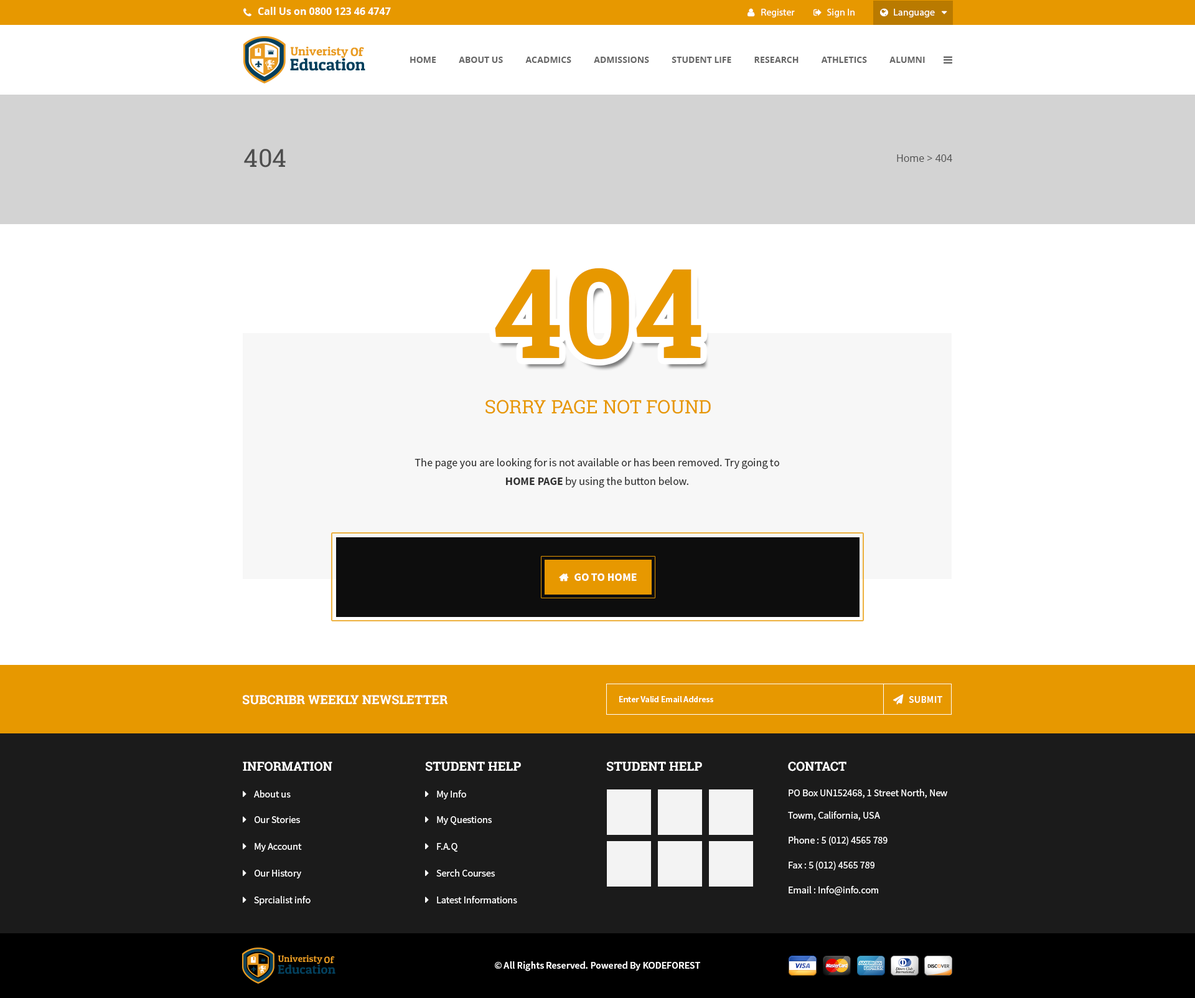
<style>
.page{position:relative;width:1195px;height:998px;background:#ffffff}
.page>*{position:absolute;margin:0}
.t1{font:10px "OpenSans-Bold";color:#ffffff}
.t2{font:10px "MyriadPro-Regular";color:#ffffff}
.t3{font:8.7px "OpenSans-Bold";color:#666666;text-transform:uppercase}
.t4{font:24.9px "RobotoSlab-Regular";color:#4d4d4d;text-transform:uppercase}
.t5{font:10px "OpenSans";color:#4d4d4d}
.t6{font:124.5px "RobotoSlab-Bold";color:#e79800;text-transform:uppercase}
.t7{font:18.7px "RobotoSlab-Regular";color:#e79800;text-transform:uppercase}
.t8{font:11.2px/18.7px "SourceSansPro-Regular";color:#333333}
.t9{font:11.2px/18.7px "SourceSansPro-Bold";color:#333333}
.t10{font:11.2px "SourceSansPro-Bold";color:#ffffff;text-transform:uppercase}
.t11{font:12.4px "RobotoSlab-Bold";color:#ffffff;text-transform:uppercase}
.t12{font:8.7px "SourceSansPro-Semibold";color:#ffffff}
.t13{font:10px "SourceSansPro-Semibold";color:#ffffff}
.t14{font:10px "SourceSansPro-Regular";color:#ffffff}
.t15{font:10px/22.4px "SourceSansPro-Regular";color:#ffffff}
</style>
<div class="page">
<p class="t1" style="left:258px;top:7px;width:133px;height:8px">Call Us on 0800 123 46 4747</p>
<p class="t2" style="left:761px;top:9px;width:34px;height:8px">Register</p>
<p class="t2" style="left:827px;top:9px;width:28px;height:8px">Sign In</p>
<p class="t2" style="left:894px;top:9px;width:41px;height:8px">Language</p>
<p class="t3" style="left:410px;top:57px;width:515px;height:6px">Home          About Us          ACADMICS          ADMISSIONS          STUDENT LIFE          RESEARCH          ATHLETICS          ALUMNI</p>
<p class="t4" style="left:244px;top:149px;width:42px;height:18px">404</p>
<p class="t5" style="left:897px;top:154px;width:55px;height:8px">Home &gt; 404</p>
<p class="t6" style="left:495px;top:268px;width:206px;height:92px">404</p>
<p class="t7" style="left:486px;top:400px;width:225px;height:14px">Sorry Page Not Found</p>
<p class="t8" style="left:415px;top:458px;width:364px;height:30px;text-align:center">The page you are looking for is not available or has been removed. Try going to <br><span class="t9">HOME PAGE </span>by using the button below.</p>
<p class="t10" style="left:575px;top:573px;width:62px;height:8px">GO TO HOME</p>
<p class="t11" style="left:243px;top:695px;width:205px;height:10px">subcribr weekly newsletter</p>
<p class="t12" style="left:619px;top:696px;width:94px;height:6px">Enter Valid Email Address</p>
<p class="t13" style="left:909px;top:696px;width:33px;height:7px">SUBMIT</p>
<p class="t11" style="left:243px;top:761px;width:89px;height:10px">INFORMATION</p>
<p class="t11" style="left:426px;top:761px;width:95px;height:10px">student help</p>
<p class="t11" style="left:607px;top:761px;width:95px;height:10px">student help</p>
<p class="t11" style="left:788px;top:761px;width:59px;height:10px">Contact</p>
<p class="t14" style="left:254px;top:790px;width:37px;height:7px">About us</p>
<p class="t14" style="left:437px;top:790px;width:29px;height:9px">My Info</p>
<p class="t15" style="left:788px;top:789px;width:159px;height:31px;text-align:right">PO Box UN152468, 1 Street North, New Towm, California, USA</p>
<p class="t14" style="left:255px;top:816px;width:45px;height:7px">Our Stories</p>
<p class="t14" style="left:437px;top:816px;width:55px;height:9px">My Questions</p>
<p class="t14" style="left:255px;top:843px;width:47px;height:9px">My Account</p>
<p class="t14" style="left:437px;top:843px;width:20px;height:9px">F.A.Q</p>
<p class="t14" style="left:789px;top:836px;width:99px;height:9px">Phone : 5 (012) 4565 789</p>
<p class="t14" style="left:255px;top:870px;width:46px;height:8px">Our History</p>
<p class="t14" style="left:436px;top:869px;width:59px;height:7px">Serch Courses</p>
<p class="t14" style="left:789px;top:861px;width:86px;height:9px">Fax : 5 (012) 4565 789</p>
<p class="t14" style="left:789px;top:886px;width:89px;height:9px">Email : Info@info.com</p>
<p class="t14" style="left:254px;top:896px;width:57px;height:9px">Sprcialist info</p>
<p class="t14" style="left:437px;top:896px;width:80px;height:7px">Latest Informations</p>
<p class="t13" style="left:495px;top:961px;width:205px;height:10px">© All Rights Reserved. Powered By KODEFOREST</p>
</div>
